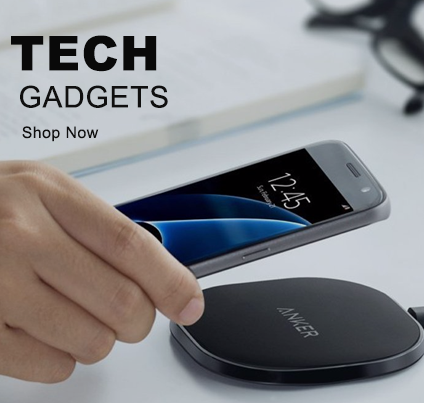
<style>
.page{position:relative;width:424px;height:403px}
.page>*{position:absolute;margin:0}
.t1{font:48px "Arial-Black";letter-spacing:0.03em;color:#090909}
.t2{font:30px "ArialMT";letter-spacing:0.03em;color:#0f0f0f}
.t3{font:16px "ArialMT";letter-spacing:0.03em;color:#0f0f0f}
</style>
<div class="page">
<p class="t1" style="left:11px;top:35px;width:146px;height:37px">TECH</p>
<p class="t2" style="left:20px;top:85px;width:148px;height:23px">GADGETS</p>
<p class="t3" style="left:22px;top:126px;width:77px;height:16px">Shop Now</p>
</div>
